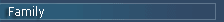
<style>
.page{position:relative;width:224px;height:22px;background:#314965}
.page>*{position:absolute;margin:0}
.t1{font:12.1px "Verdana";color:#ffffff;scale:0.91 1}
</style>
<div class="page">
<p class="t1" style="left:9px;top:6px;width:35px;height:12px">Family</p>
</div>
